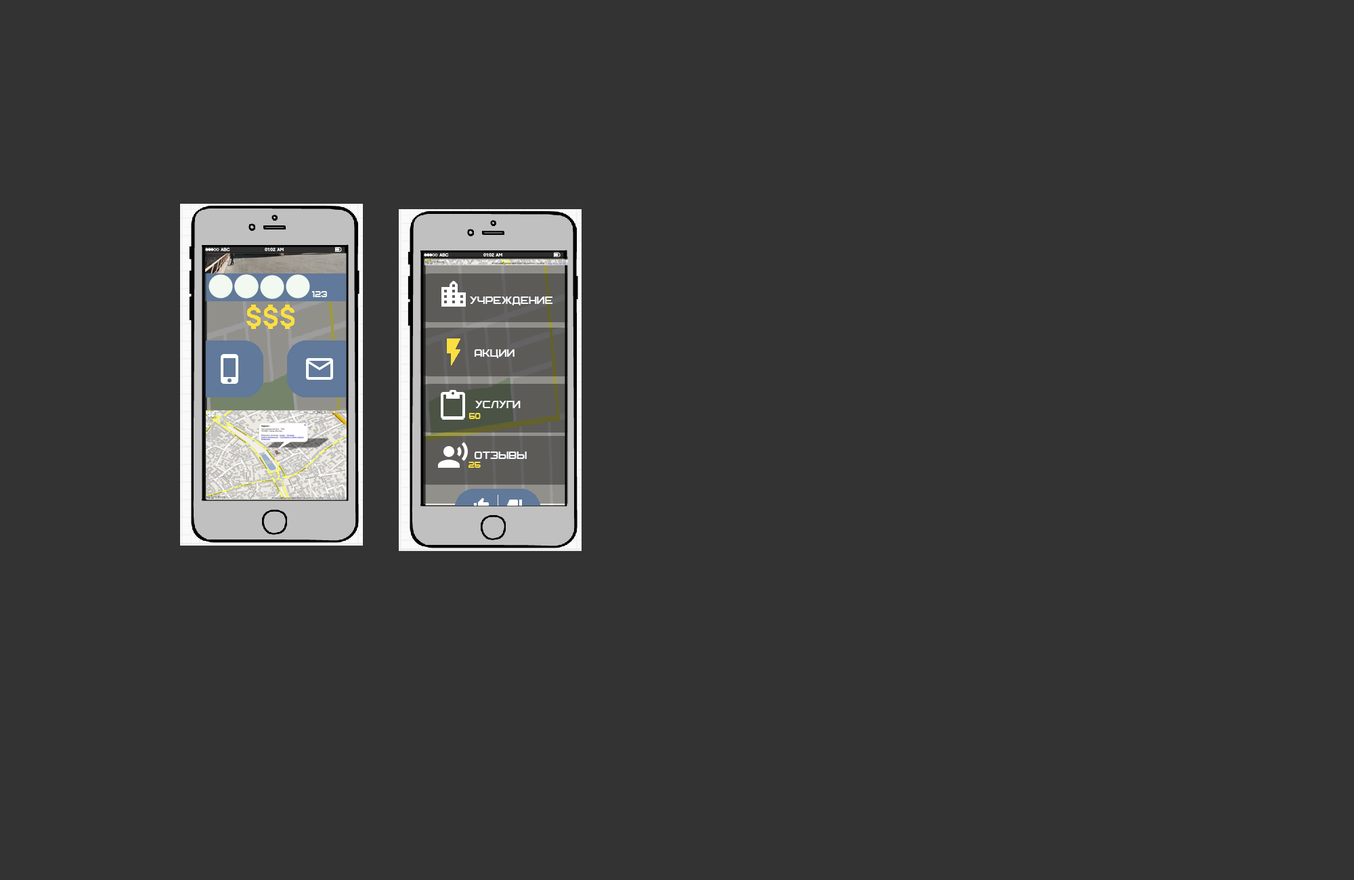
<style>
.page{position:relative;width:1354px;height:880px;background:#333333}
.page>*{position:absolute;margin:0}
.t1{font:9.5px "Archangelsk";color:#f1f9f1}
.t2{font:12.2px "Archangelsk";color:#f5f7fa}
.t3{font:9.5px "Archangelsk";color:#fbdf41}
.t4{font:9.5px "Archangelsk";color:#f5f7fa}
</style>
<div class="page">
<p class="t1" style="left:312px;top:291px;width:15px;height:6px">123</p>
<p class="t2" style="left:470px;top:297px;width:83px;height:8px">УЧРЕЖДЕНИЕ</p>
<p class="t2" style="left:474px;top:349px;width:41px;height:9px">АКЦИИ</p>
<p class="t2" style="left:475px;top:401px;width:46px;height:7px">УСЛУГИ</p>
<p class="t3" style="left:469px;top:413px;width:12px;height:6px">50</p>
<p class="t3" style="left:468px;top:462px;width:13px;height:6px">25</p>
<p class="t2" style="left:474px;top:452px;width:53px;height:7px"><span class="t4"> </span>ОТЗЫВЫ</p>
</div>
